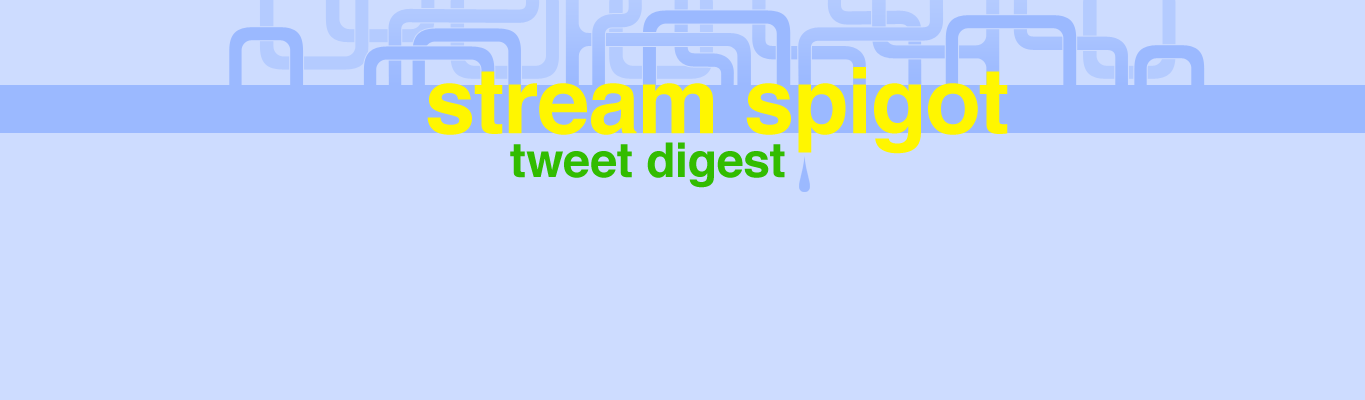
<style>
.page{position:relative;width:1365px;height:400px;background:#cddcff}
.page>*{position:absolute;margin:0}
.t1{font:91.3px "Helvetica-Bold";color:#fff600}
.t2{font:48px "Helvetica-Bold";color:#32bc00}
</style>
<div class="page">
<p class="t1" style="left:427px;top:67px;width:581px;height:87px">stream spigot</p>
<p class="t2" style="left:510px;top:142px;width:275px;height:46px">tweet digest</p>
</div>
